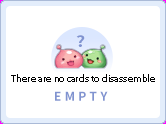
<style>
.page{position:relative;width:166px;height:124px;background:#ffffff}
.page>*{position:absolute;margin:0}
.t1{font:10px "MyriadPro-Regular";color:#000000}
</style>
<div class="page">
<p class="t1" style="left:11px;top:74px;width:144px;height:8px">There are no cards to disassemble</p>
</div>
